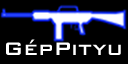
<style>
.page{position:relative;width:128px;height:64px;background:#000000}
.page>*{position:absolute;margin:0}
.t1{font:24px "BankGothicBT-Medium";color:#ffffff}
</style>
<div class="page">
<p class="t1" style="left:6px;top:39px;width:115px;height:16px">GépPityu</p>
</div>
